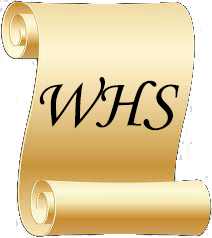
<style>
.page{position:relative;width:212px;height:238px}
.page>*{position:absolute;margin:0}
.t1{font:70px "MonotypeCorsiva";color:#000000}
</style>
<div class="page">
<p class="t1" style="left:39px;top:77px;width:141px;height:54px">WHS</p>
</div>
